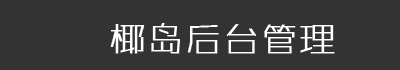
<style>
.page{position:relative;width:400px;height:70px;background:#333333}
.page>*{position:absolute;margin:0}
.t1{font:36px "ZHSRXT--GBK1-0";letter-spacing:0.025em;color:#ffffff;font-weight:bold}
</style>
<div class="page">
<p class="t1" style="left:110px;top:23px;width:225px;height:31px">椰岛后台管理</p>
</div>
